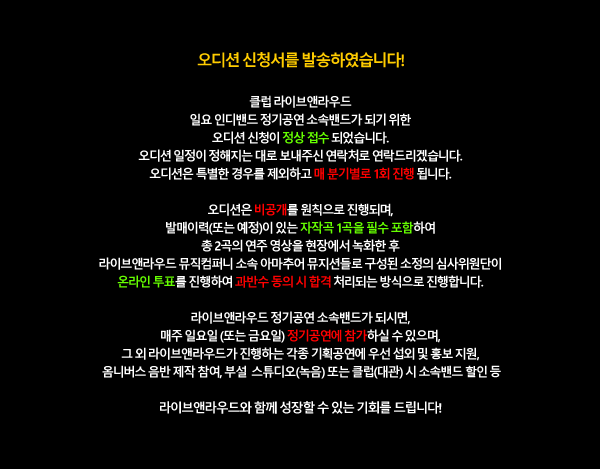
<style>
.page{position:relative;width:600px;height:469px;background:#000000}
.page>*{position:absolute;margin:0}
.t1{font:16px "MalgunGothicBold";letter-spacing:-0.05em;color:#ffcc00}
.t2{font:12.5px/18px "MalgunGothicBold";letter-spacing:-0.05em;color:#ffffff}
.t3{font:12.5px/18px "MalgunGothicBold";letter-spacing:-0.05em;color:#66ff00}
.t4{font:12.5px/18px "MalgunGothicBold";letter-spacing:-0.05em;color:#ff0000}
.t5{font:13px/18px "MalgunGothicBold";letter-spacing:-0.05em;color:#ffffff}
</style>
<div class="page">
<p class="t1" style="left:197px;top:52px;width:207px;height:16px">오디션 신청서를 발송하였습니다!</p>
<p class="t2" style="left:99px;top:95px;width:402px;height:319px;text-align:center">클럽 라이브앤라우드<br>일요 인디밴드 정기공연 소속밴드가 되기 위한<br>오디션 신청이 <span class="t3">정상 접수</span> 되었습니다.<br>오디션 일정이 정해지는 대로 보내주신 연락처로 연락드리겠습니다.<br>오디션은 특별한 경우를 제외하고 <span class="t4">매 분기별로 1회 진행</span> 됩니다.<br><br>오디션은 <span class="t4">비공개</span>를 원칙으로 진행되며,<br>발매이력(또는 예정)이 있는 <span class="t3">자작곡 1곡을 필수 포함</span>하여<br>총 2곡의 연주 영상을 현장에서 녹화한 후<br>라이브앤라우드 뮤직컴퍼니 소속 아마추어 뮤지션들로 구성된 소정의 심사위원단이<br><span class="t3">온라인 투표</span>를 진행하여 <span class="t4">과반수 동의 시 합격</span> 처리되는 방식으로 진행합니다.<br><br>라이브앤라우드 정기공연 소속밴드가 되시면,<br>매주 일요일 (또는 금요일)<span class="t4"> 정기공연에 참가</span>하실 수 있으며,<br>그 외 라이브앤라우드가 진행하는 각종 기획공연에 우선 섭외 및 홍보 지원,<br> 옴니버스 음반 제작 참여, 부설  스튜디오(녹음) 또는 클럽(대관) 시 소속밴드 할인 등<br><br><span class="t5">라이브앤라우드와 함께 성장할 수 있는 기회를 드립니다!</span></p>
</div>
